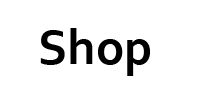
<style>
.page{position:relative;width:197px;height:100px;background:#ffffff}
.page>*{position:absolute;margin:0}
.t1{font:50.8px "Corbel-Bold";color:#000000}
</style>
<div class="page">
<p class="t1" style="left:40px;top:28px;width:110px;height:48px">Shop</p>
</div>
